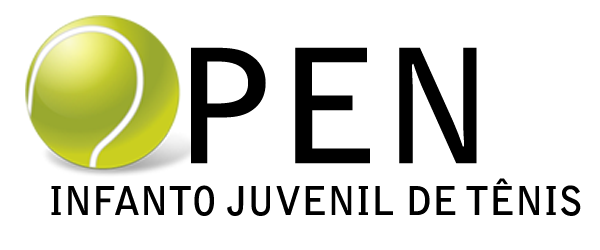
<style>
.page{position:relative;width:600px;height:250px;background:#ffffff}
.page>*{position:absolute;margin:0}
.t1{font:157.1px "BellGothicStd-Bold";color:#000000}
.t2{font:39.3px "BellGothicStd-Bold";color:#000000}
</style>
<div class="page">
<p class="t1" style="left:191px;top:47px;width:286px;height:117px">PEN</p>
<p class="t2" style="left:51px;top:178px;width:530px;height:38px">INFANTO JUVENIL DE TÊNIS</p>
</div>
